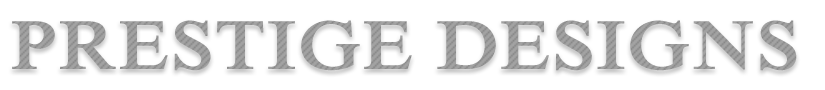
<style>
.page{position:relative;width:825px;height:90px;background:#ffffff}
.page>*{position:absolute;margin:0}
.t1{font:72px "IskoolaPota-Bold";letter-spacing:0.025em;color:#9c9c9c}
</style>
<div class="page">
<p class="t1" style="left:12px;top:20px;width:785px;height:51px">PRESTIGE DESIGNS</p>
</div>
